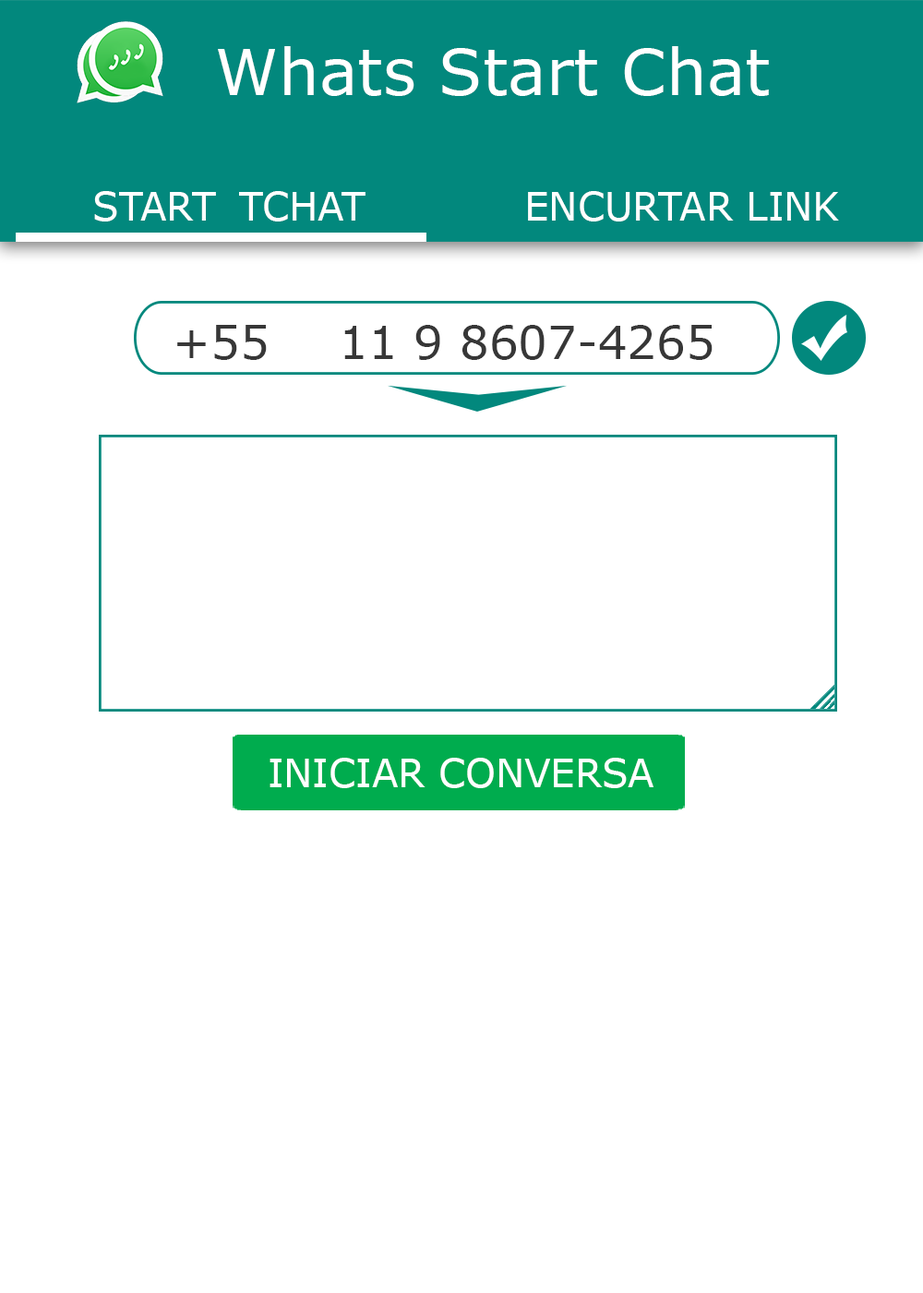
<style>
.page{position:relative;width:923px;height:1293px;background:#ffffff}
.page>*{position:absolute;margin:0}
.t1{font:64.1px "Verdana";color:#ffffff}
.t2{font:38.4px "Verdana";color:#ffffff}
.t3{font:46.1px "Verdana";color:#373737}
</style>
<div class="page">
<p class="t1" style="left:218px;top:46px;width:550px;height:50px">Whats Start Chat</p>
<p class="t2" style="left:94px;top:191px;width:745px;height:30px">START  TCHAT     ENCURTAR LINK</p>
<p class="t3" style="left:177px;top:325px;width:535px;height:35px">+55   11 9 8607-4265</p>
<p class="t2" style="left:269px;top:757px;width:384px;height:31px">INICIAR CONVERSA</p>
</div>
